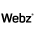
<style>
.page{position:relative;width:35px;height:35px;background:#ffffff}
.page>*{position:absolute;margin:0}
.t1{font:12.8px "Panton-Bold";letter-spacing:-0.02em;color:#000000}
.t2{font:5.2px "Panton-Bold";letter-spacing:-0.02em;color:#000000}
</style>
<div class="page">
<p class="t1" style="left:1px;top:13px;width:33px;height:10px">Webz<span class="t2">®</span></p>
</div>
